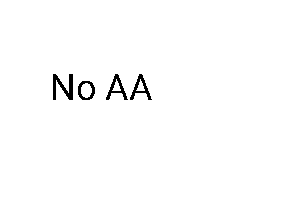
<style>
.page{position:relative;width:300px;height:200px;background:#ffffff}
.page>*{position:absolute;margin:0}
.t1{font:36px "Roboto-Regular";color:#000000}
</style>
<div class="page">
<p class="t1" style="left:53px;top:74px;width:99px;height:26px">No AA</p>
</div>
